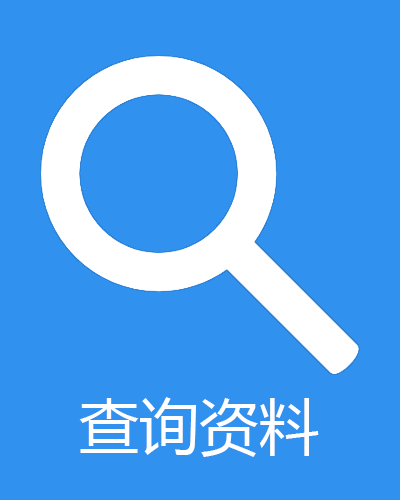
<style>
.page{position:relative;width:400px;height:500px;background:#3191ef}
.page>*{position:absolute;margin:0}
.t1{font:60px "MicrosoftYaHei";color:#ffffff}
</style>
<div class="page">
<p class="t1" style="left:79px;top:397px;width:240px;height:60px">查询资料</p>
</div>
